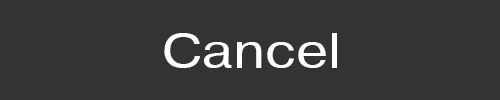
<style>
.page{position:relative;width:500px;height:100px;background:#333333}
.page>*{position:absolute;margin:0}
.t1{font:48px "Helvetica";color:#ffffff;scale:1.2 1}
</style>
<div class="page">
<p class="t1" style="left:164px;top:33px;width:173px;height:35px">Cancel</p>
</div>
